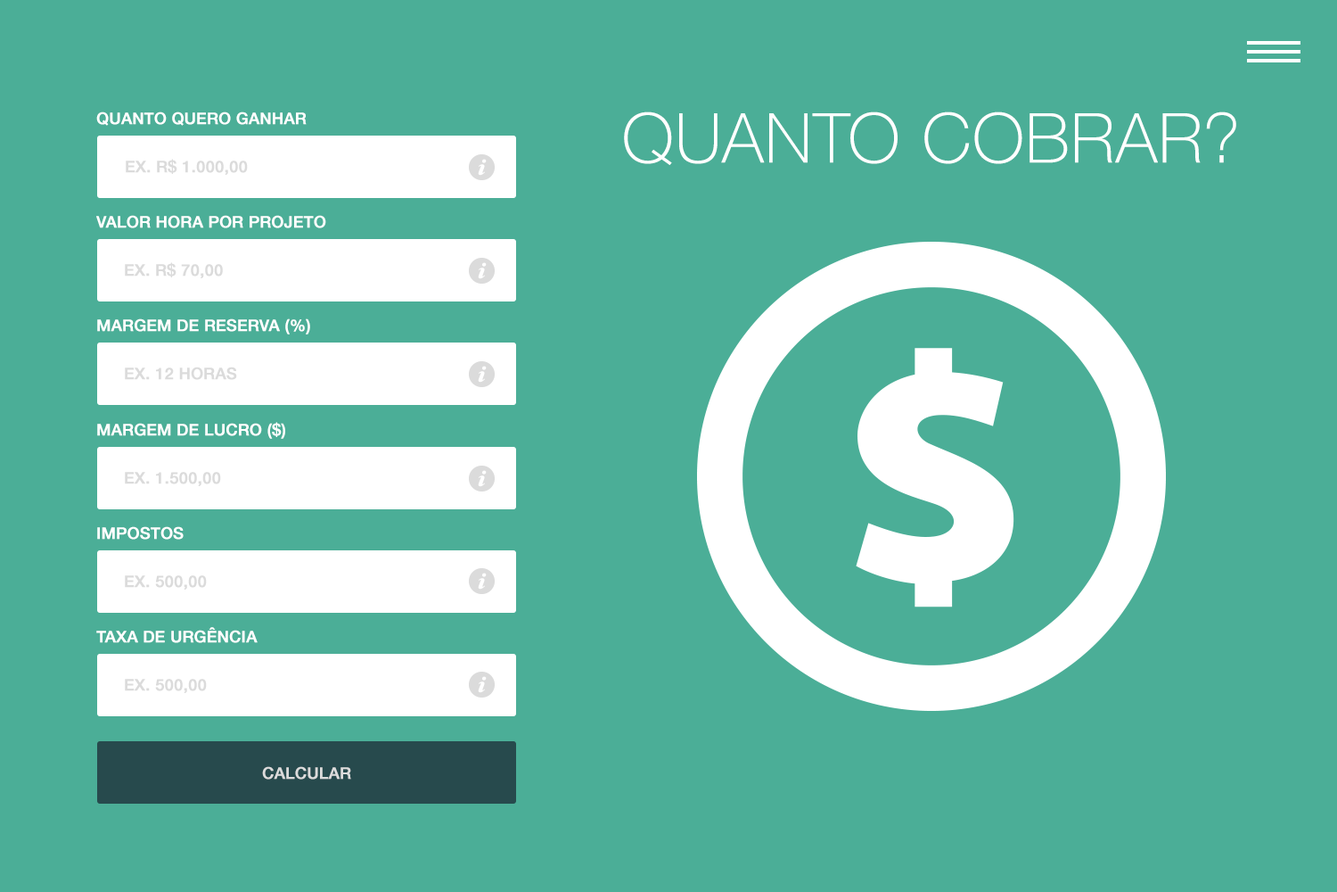
<style>
.page{position:relative;width:1337px;height:892px;background:#4bae97}
.page>*{position:absolute;margin:0}
.t1{font:16px "HelveticaNeue-Medium";color:#ffffff;text-transform:uppercase;font-weight:bold}
.t2{font:68.8px "HelveticaNeue-Thin";color:#ffffff;text-transform:uppercase;font-weight:bold}
.t3{font:16px "HelveticaNeue-Medium";color:#dbdbdb;text-transform:uppercase;font-weight:bold}
</style>
<div class="page">
<p class="t1" style="left:96px;top:111px;width:211px;height:15px">Quanto quero ganhar</p>
<p class="t2" style="left:624px;top:111px;width:613px;height:54px">Quanto cobrar?</p>
<p class="t3" style="left:126px;top:159px;width:122px;height:16px">EX. R$ 1.000,00</p>
<p class="t1" style="left:96px;top:215px;width:230px;height:13px">Valor hora por projeto</p>
<p class="t3" style="left:125px;top:262px;width:98px;height:16px">EX. R$ 70,00</p>
<p class="t1" style="left:97px;top:318px;width:213px;height:16px">Margem de reserva (%)</p>
<p class="t3" style="left:125px;top:366px;width:112px;height:14px">EX. 12 horas</p>
<p class="t1" style="left:97px;top:422px;width:188px;height:17px">Margem de lucro ($)</p>
<p class="t3" style="left:125px;top:472px;width:96px;height:14px">EX. 1.500,00</p>
<p class="t1" style="left:97px;top:526px;width:87px;height:13px">Impostos</p>
<p class="t3" style="left:125px;top:575px;width:82px;height:14px">EX. 500,00</p>
<p class="t1" style="left:96px;top:627px;width:162px;height:16px">taxa de urgência</p>
<p class="t3" style="left:125px;top:679px;width:82px;height:14px">EX. 500,00</p>
<p class="t3" style="left:262px;top:766px;width:89px;height:13px">calcular</p>
</div>
